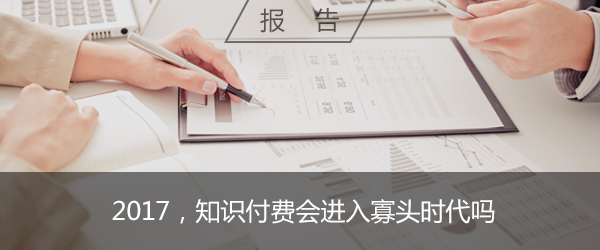
<style>
.page{position:relative;width:600px;height:250px}
.page>*{position:absolute;margin:0}
.t1{font:25px "MicrosoftYaHei";color:#565351}
.t2{font:25px "MicrosoftYaHei";color:#ffffff}
</style>
<div class="page">
<p class="t1" style="left:260px;top:8px;width:79px;height:25px">报    告</p>
<p class="t2" style="left:112px;top:199px;width:383px;height:25px">2017，知识付费会进入寡头时代吗</p>
</div>
